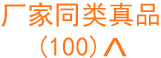
<style>
.page{position:relative;width:161px;height:58px;background:#ffffff}
.page>*{position:absolute;margin:0}
.t1{font:26.6px "SimHei";color:#ff7418;text-transform:uppercase}
.t2{font:26.7px "004-CAI978";color:#ff7418;text-transform:uppercase;scale:2 1}
</style>
<div class="page">
<p class="t1" style="left:1px;top:2px;width:158px;height:56px;text-align:center">厂家同类真品<br>(100)</p>
<p class="t2" style="left:103px;top:38px;width:24px;height:19px">V</p>
</div>
